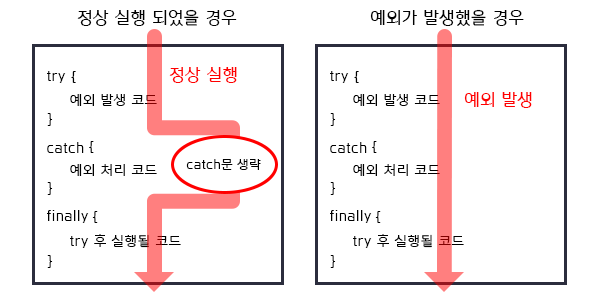
<style>
.page{position:relative;width:600px;height:300px;background:#ffffff}
.page>*{position:absolute;margin:0}
.t1{font:16.7px "DakiB";letter-spacing:0.05em;color:#000000}
.t2{font:13.7px "DakiM";letter-spacing:0.05em;color:#000000}
.t3{font:16.7px "DakiB";letter-spacing:0.05em;color:#ff0000}
.t4{font:12.5px "DakiM";letter-spacing:0.05em;color:#000000}
</style>
<div class="page">
<p class="t1" style="left:77px;top:9px;width:160px;height:17px">정상 실행 되었을 경우</p>
<p class="t1" style="left:370px;top:9px;width:154px;height:17px">예외가 발생했을 경우</p>
<p class="t2" style="left:47px;top:71px;width:19px;height:12px">try</p>
<p class="t2" style="left:71px;top:71px;width:5px;height:12px">{</p>
<p class="t3" style="left:169px;top:67px;width:68px;height:16px">정상 실행</p>
<p class="t2" style="left:330px;top:71px;width:19px;height:12px">try</p>
<p class="t2" style="left:354px;top:71px;width:5px;height:12px">{</p>
<p class="t2" style="left:70px;top:94px;width:87px;height:12px">예외 발생 코드</p>
<p class="t2" style="left:353px;top:94px;width:87px;height:12px">예외 발생 코드</p>
<p class="t3" style="left:464px;top:92px;width:68px;height:16px">예외 발생</p>
<p class="t2" style="left:47px;top:113px;width:6px;height:13px">}</p>
<p class="t2" style="left:330px;top:113px;width:6px;height:13px">}</p>
<p class="t2" style="left:47px;top:142px;width:37px;height:11px">catch</p>
<p class="t2" style="left:89px;top:141px;width:5px;height:12px">{</p>
<p class="t2" style="left:330px;top:142px;width:37px;height:11px">catch</p>
<p class="t2" style="left:372px;top:141px;width:5px;height:12px">{</p>
<p class="t4" style="left:186px;top:159px;width:75px;height:11px">catch문 생략</p>
<p class="t2" style="left:70px;top:164px;width:87px;height:12px">예외 처리 코드</p>
<p class="t2" style="left:353px;top:164px;width:87px;height:12px">예외 처리 코드</p>
<p class="t2" style="left:47px;top:182px;width:6px;height:13px">}</p>
<p class="t2" style="left:330px;top:182px;width:6px;height:13px">}</p>
<p class="t2" style="left:47px;top:210px;width:42px;height:13px">finally</p>
<p class="t2" style="left:92px;top:211px;width:6px;height:12px">{</p>
<p class="t2" style="left:330px;top:210px;width:42px;height:13px">finally</p>
<p class="t2" style="left:375px;top:211px;width:6px;height:12px">{</p>
<p class="t2" style="left:70px;top:234px;width:111px;height:14px">try 후 실행될 코드</p>
<p class="t2" style="left:353px;top:234px;width:111px;height:14px">try 후 실행될 코드</p>
<p class="t2" style="left:47px;top:255px;width:6px;height:13px">}</p>
<p class="t2" style="left:330px;top:255px;width:6px;height:13px">}</p>
</div>
